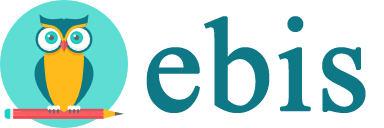
<style>
.page{position:relative;width:384px;height:128px;background:#ffffff}
.page>*{position:absolute;margin:0}
.t1{font:133.3px "TimesNewRomanPSMT";color:#0e7886;font-weight:bold}
</style>
<div class="page">
<p class="t1" style="left:146px;top:16px;width:220px;height:97px">ebis</p>
</div>
